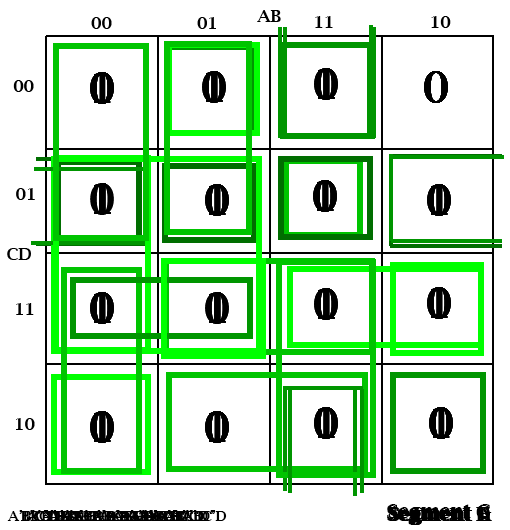
<style>
.page{position:relative;width:510px;height:530px;background:#ffffff}
.page>*{position:absolute;margin:0}
.t1{font:41.7px "LucidaBright-Demi";color:#000000}
.t2{font:13.9px "LucidaBright-Demi";color:#000000}
.t3{font:19.4px "LucidaBright-Demi";color:#000000}
</style>
<div class="page">
<p class="t1" style="left:90px;top:72px;width:24px;height:32px">0</p>
<p class="t1" style="left:90px;top:72px;width:24px;height:32px">0</p>
<p class="t1" style="left:90px;top:72px;width:24px;height:32px">0</p>
<p class="t1" style="left:90px;top:72px;width:24px;height:32px">0</p>
<p class="t1" style="left:90px;top:72px;width:24px;height:32px">0</p>
<p class="t1" style="left:90px;top:72px;width:24px;height:32px">0</p>
<p class="t1" style="left:202px;top:71px;width:24px;height:32px">0</p>
<p class="t1" style="left:202px;top:71px;width:24px;height:32px">0</p>
<p class="t1" style="left:202px;top:71px;width:24px;height:32px">0</p>
<p class="t1" style="left:202px;top:71px;width:24px;height:32px">0</p>
<p class="t1" style="left:206px;top:71px;width:17px;height:31px">1</p>
<p class="t1" style="left:206px;top:71px;width:17px;height:31px">1</p>
<p class="t1" style="left:206px;top:71px;width:17px;height:31px">1</p>
<p class="t1" style="left:314px;top:68px;width:24px;height:32px">0</p>
<p class="t1" style="left:314px;top:68px;width:24px;height:32px">0</p>
<p class="t1" style="left:314px;top:68px;width:24px;height:32px">0</p>
<p class="t1" style="left:314px;top:68px;width:24px;height:32px">0</p>
<p class="t1" style="left:318px;top:68px;width:17px;height:31px">1</p>
<p class="t1" style="left:318px;top:68px;width:17px;height:31px">1</p>
<p class="t1" style="left:318px;top:68px;width:17px;height:31px">1</p>
<p class="t1" style="left:424px;top:71px;width:24px;height:32px">0</p>
<p class="t1" style="left:424px;top:71px;width:24px;height:32px">0</p>
<p class="t1" style="left:424px;top:71px;width:24px;height:32px">0</p>
<p class="t1" style="left:424px;top:71px;width:24px;height:32px">0</p>
<p class="t1" style="left:424px;top:71px;width:24px;height:32px">0</p>
<p class="t1" style="left:424px;top:71px;width:24px;height:32px">0</p>
<p class="t1" style="left:424px;top:71px;width:24px;height:32px">0</p>
<p class="t1" style="left:90px;top:183px;width:24px;height:32px">0</p>
<p class="t1" style="left:90px;top:183px;width:24px;height:32px">0</p>
<p class="t1" style="left:94px;top:183px;width:17px;height:31px">1</p>
<p class="t1" style="left:94px;top:183px;width:17px;height:31px">1</p>
<p class="t1" style="left:94px;top:183px;width:17px;height:31px">1</p>
<p class="t1" style="left:94px;top:183px;width:17px;height:31px">1</p>
<p class="t1" style="left:94px;top:183px;width:17px;height:31px">1</p>
<p class="t1" style="left:205px;top:184px;width:24px;height:32px">0</p>
<p class="t1" style="left:205px;top:184px;width:24px;height:32px">0</p>
<p class="t1" style="left:205px;top:184px;width:24px;height:32px">0</p>
<p class="t1" style="left:205px;top:184px;width:24px;height:32px">0</p>
<p class="t1" style="left:205px;top:184px;width:24px;height:32px">0</p>
<p class="t1" style="left:313px;top:180px;width:24px;height:32px">0</p>
<p class="t1" style="left:313px;top:180px;width:24px;height:32px">0</p>
<p class="t1" style="left:313px;top:180px;width:24px;height:32px">0</p>
<p class="t1" style="left:313px;top:180px;width:24px;height:32px">0</p>
<p class="t1" style="left:313px;top:180px;width:24px;height:32px">0</p>
<p class="t1" style="left:427px;top:184px;width:24px;height:32px">0</p>
<p class="t1" style="left:427px;top:184px;width:24px;height:32px">0</p>
<p class="t1" style="left:427px;top:184px;width:24px;height:32px">0</p>
<p class="t1" style="left:427px;top:184px;width:24px;height:32px">0</p>
<p class="t1" style="left:427px;top:184px;width:24px;height:32px">0</p>
<p class="t1" style="left:90px;top:292px;width:24px;height:32px">0</p>
<p class="t1" style="left:90px;top:292px;width:24px;height:32px">0</p>
<p class="t1" style="left:90px;top:292px;width:24px;height:32px">0</p>
<p class="t1" style="left:90px;top:292px;width:24px;height:32px">0</p>
<p class="t1" style="left:90px;top:292px;width:24px;height:32px">0</p>
<p class="t1" style="left:205px;top:292px;width:24px;height:32px">0</p>
<p class="t1" style="left:205px;top:292px;width:24px;height:32px">0</p>
<p class="t1" style="left:205px;top:292px;width:24px;height:32px">0</p>
<p class="t1" style="left:209px;top:292px;width:17px;height:31px">1</p>
<p class="t1" style="left:209px;top:292px;width:17px;height:31px">1</p>
<p class="t1" style="left:209px;top:292px;width:17px;height:31px">1</p>
<p class="t1" style="left:209px;top:292px;width:17px;height:31px">1</p>
<p class="t1" style="left:314px;top:288px;width:24px;height:32px">0</p>
<p class="t1" style="left:314px;top:288px;width:24px;height:32px">0</p>
<p class="t1" style="left:314px;top:288px;width:24px;height:32px">0</p>
<p class="t1" style="left:314px;top:288px;width:24px;height:32px">0</p>
<p class="t1" style="left:318px;top:288px;width:17px;height:31px">1</p>
<p class="t1" style="left:318px;top:288px;width:17px;height:31px">1</p>
<p class="t1" style="left:318px;top:288px;width:17px;height:31px">1</p>
<p class="t1" style="left:427px;top:287px;width:24px;height:32px">0</p>
<p class="t1" style="left:427px;top:287px;width:24px;height:32px">0</p>
<p class="t1" style="left:427px;top:287px;width:24px;height:32px">0</p>
<p class="t1" style="left:427px;top:287px;width:24px;height:32px">0</p>
<p class="t1" style="left:427px;top:287px;width:24px;height:32px">0</p>
<p class="t1" style="left:90px;top:411px;width:24px;height:32px">0</p>
<p class="t1" style="left:90px;top:411px;width:24px;height:32px">0</p>
<p class="t1" style="left:90px;top:411px;width:24px;height:32px">0</p>
<p class="t1" style="left:90px;top:411px;width:24px;height:32px">0</p>
<p class="t1" style="left:90px;top:411px;width:24px;height:32px">0</p>
<p class="t1" style="left:205px;top:411px;width:24px;height:32px">0</p>
<p class="t1" style="left:205px;top:411px;width:24px;height:32px">0</p>
<p class="t1" style="left:205px;top:411px;width:24px;height:32px">0</p>
<p class="t1" style="left:205px;top:411px;width:24px;height:32px">0</p>
<p class="t1" style="left:205px;top:411px;width:24px;height:32px">0</p>
<p class="t1" style="left:205px;top:411px;width:24px;height:32px">0</p>
<p class="t1" style="left:314px;top:407px;width:24px;height:32px">0</p>
<p class="t1" style="left:314px;top:407px;width:24px;height:32px">0</p>
<p class="t1" style="left:314px;top:407px;width:24px;height:32px">0</p>
<p class="t1" style="left:314px;top:407px;width:24px;height:32px">0</p>
<p class="t1" style="left:314px;top:407px;width:24px;height:32px">0</p>
<p class="t1" style="left:429px;top:407px;width:24px;height:32px">0</p>
<p class="t1" style="left:429px;top:407px;width:24px;height:32px">0</p>
<p class="t1" style="left:429px;top:407px;width:24px;height:32px">0</p>
<p class="t1" style="left:429px;top:407px;width:24px;height:32px">0</p>
<p class="t1" style="left:429px;top:407px;width:24px;height:32px">0</p>
<p class="t1" style="left:429px;top:407px;width:24px;height:32px">0</p>
<p class="t2" style="left:7px;top:510px;width:220px;height:11px">A’B’C’D+A’BC’D’+AB’CD+ABC’D</p>
<p class="t3" style="left:387px;top:505px;width:102px;height:18px">Segment C</p>
<p class="t3" style="left:387px;top:507px;width:103px;height:18px">Segment D</p>
<p class="t3" style="left:388px;top:507px;width:104px;height:18px">Segment A</p>
<p class="t3" style="left:388px;top:504px;width:104px;height:18px">Segment G</p>
<p class="t3" style="left:389px;top:507px;width:101px;height:18px">Segment B</p>
<p class="t3" style="left:390px;top:507px;width:100px;height:18px">Segment E</p>
<p class="t3" style="left:390px;top:507px;width:100px;height:18px">Segment F</p>
</div>
